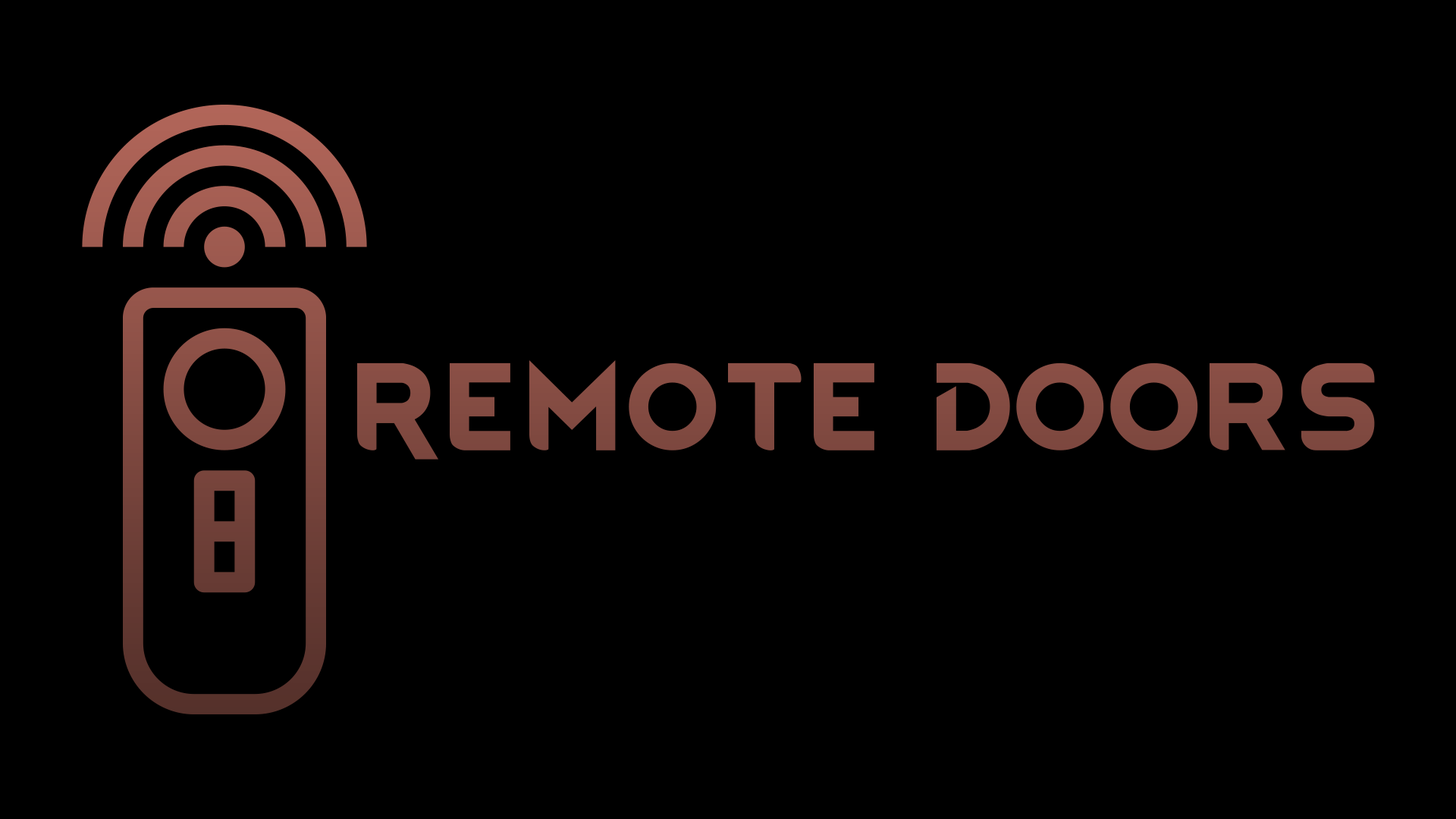
<style>
.page{position:relative;width:1456px;height:819px;background:#000000}
.page>*{position:absolute;margin:0}
.t1{font:105.6px "RimWordFont";color:#844c42}
</style>
<div class="page">
<p class="t1" style="left:357px;top:360px;width:1018px;height:100px">RemotE Doors</p>
</div>
